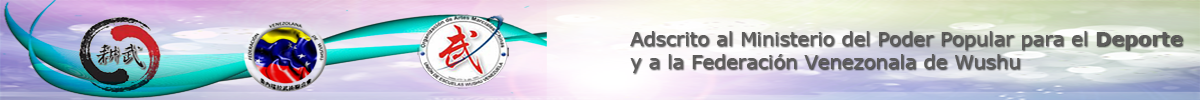
<style>
.page{position:relative;width:1200px;height:100px}
.page>*{position:absolute;margin:0}
.t1{font:18.9px "Verdana";color:#5d5c5b;scale:1.03 1}
.t2{font:18.9px "Verdana-Bold";color:#5d5c5b;scale:1.03 1}
</style>
<div class="page">
<p class="t1" style="left:630px;top:31px;width:553px;height:42px">Adscrito al Ministerio del Poder Popular para el <span class="t2">Deporte <br></span>y a la Federación Venezonala de Wushu</p>
</div>
